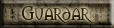
<style>
.page{position:relative;width:114px;height:28px}
.page>*{position:absolute;margin:0}
.t1{font:19px "Morpheus"}
</style>
<div class="page">
<p class="t1" style="left:21px;top:6px;width:73px;height:17px">Guardar</p>
</div>
